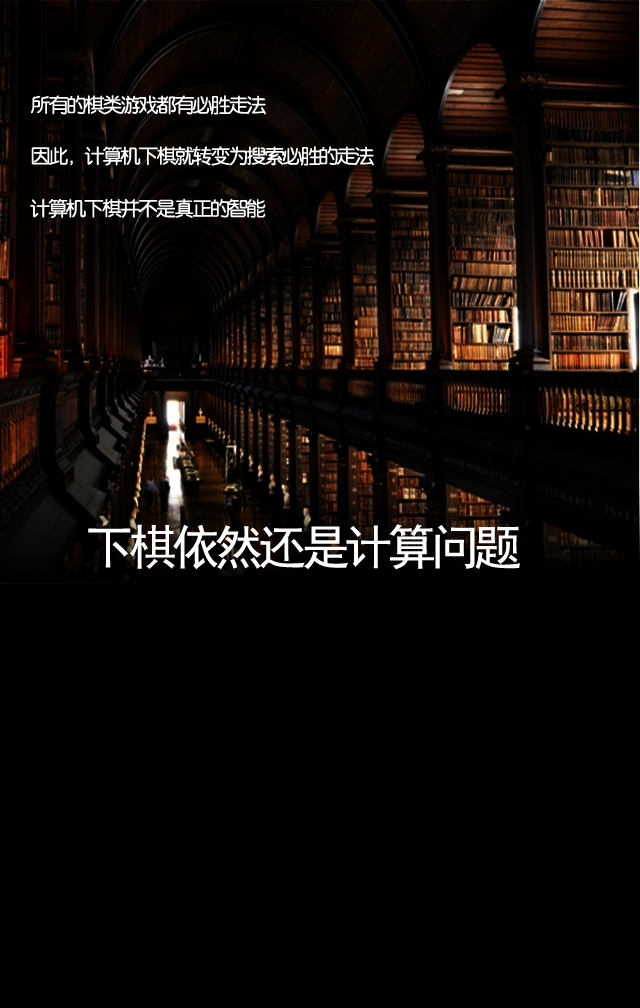
<style>
.page{position:relative;width:640px;height:1008px;background:#000000}
.page>*{position:absolute;margin:0}
.t1{font:20px "FZY3K--GBK1-0";letter-spacing:-0.1em;color:#ffffff}
.t2{font:48px "SimHei";letter-spacing:-0.1em;color:#ffffff}
</style>
<div class="page">
<p class="t1" style="left:31px;top:95px;width:235px;height:20px">所有的棋类游戏都有必胜走法</p>
<p class="t1" style="left:31px;top:146px;width:343px;height:20px">因此，计算机下棋就转变为搜索必胜的走法</p>
<p class="t1" style="left:30px;top:198px;width:236px;height:20px">计算机下棋并不是真正的智能</p>
<p class="t2" style="left:88px;top:524px;width:432px;height:46px">下棋依然还是计算问题</p>
</div>
